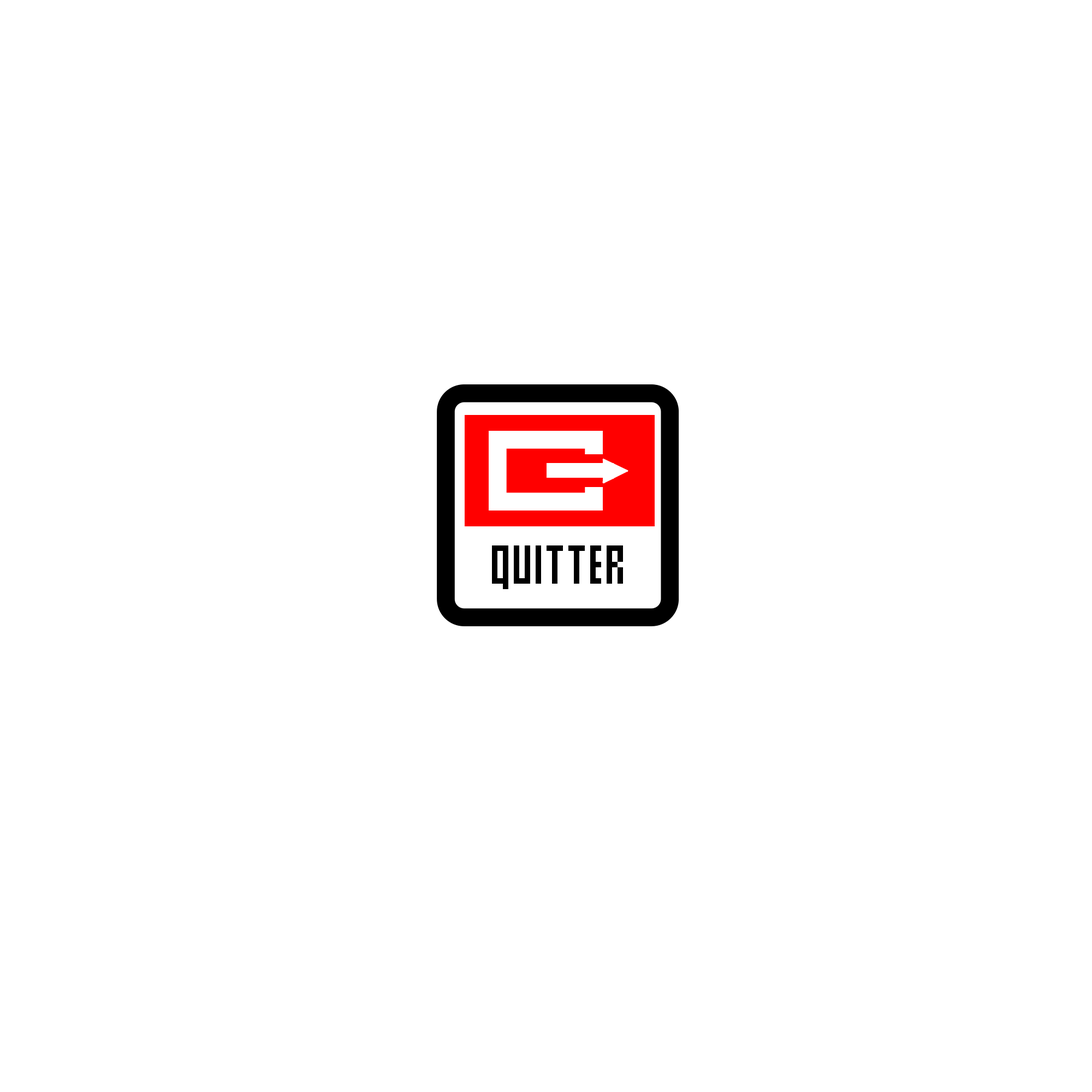
<style>
.page{position:relative;width:1092px;height:1092px;background:#ffffff}
.page>*{position:absolute;margin:0}
.t1{font:54.6px "pxl";color:#000000}
</style>
<div class="page">
<p class="t1" style="left:492px;top:545px;width:131px;height:44px">QUITTER</p>
</div>
